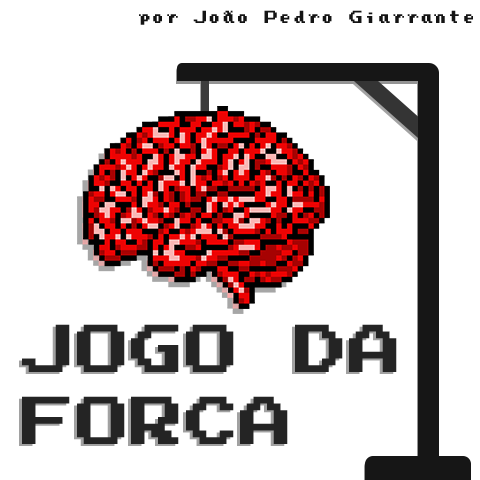
<style>
.page{position:relative;width:480px;height:480px;background:#ffffff}
.page>*{position:absolute;margin:0}
.t1{font:14px "PressStartReg";letter-spacing:0.01em;color:#141414}
.t2{font:54px/72px "PressStartK";letter-spacing:0.01em;color:#242424}
</style>
<div class="page">
<p class="t1" style="left:139px;top:10px;width:334px;height:15px">por João Pedro Giarrante</p>
<p class="t2" style="left:19px;top:326px;width:375px;height:120px;opacity:0.43">JOGO DA FORCA</p>
<p class="t2" style="left:22px;top:324px;width:375px;height:120px">JOGO DA FORCA</p>
</div>
